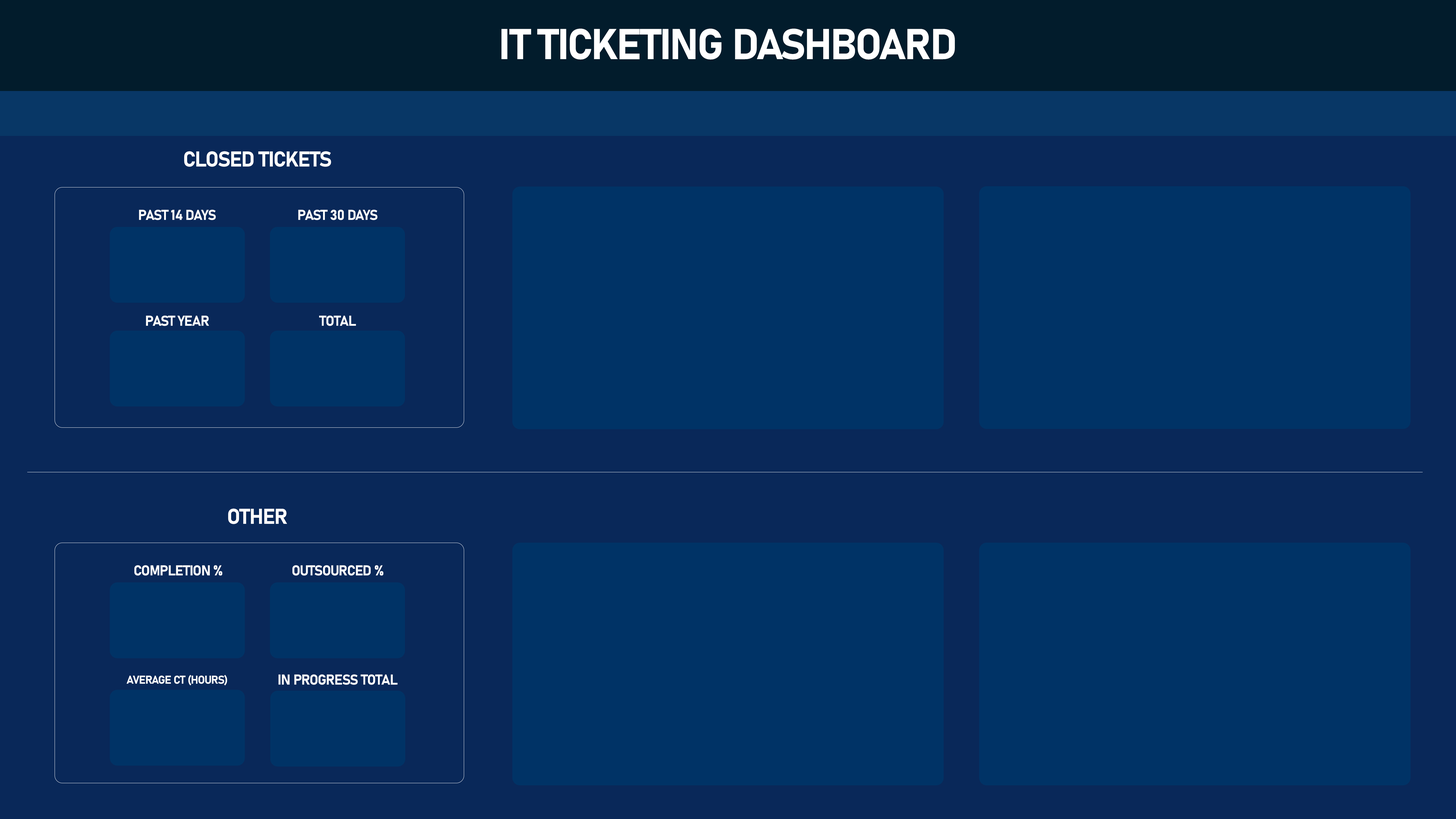
<style>
.page{position:relative;width:1456px;height:819px;background:#003366}
.page>*{position:absolute;margin:0}
.t1{font:42.5px "Bahnschrift-Bold";letter-spacing:-0.04em;color:#ffffff;text-transform:uppercase}
.t2{font:21.2px "Bahnschrift-Bold";letter-spacing:-0.04em;color:#ffffff;text-transform:uppercase}
.t3{font:14.2px "Bahnschrift-Bold";letter-spacing:-0.04em;color:#ffffff;text-transform:uppercase}
.t4{font:11.3px "Bahnschrift-Bold";letter-spacing:-0.04em;color:#ffffff;text-transform:uppercase}
</style>
<div class="page">
<p class="t1" style="left:501px;top:29px;width:454px;height:31px">IT Ticketing Dashboard</p>
<p class="t2" style="left:184px;top:151px;width:147px;height:16px">Closed Tickets</p>
<p class="t3" style="left:139px;top:210px;width:77px;height:10px">Past 14 days</p>
<p class="t3" style="left:298px;top:210px;width:80px;height:10px">Past 30 Days</p>
<p class="t3" style="left:146px;top:315px;width:63px;height:11px">Past year</p>
<p class="t3" style="left:319px;top:315px;width:37px;height:11px">total</p>
<p class="t2" style="left:228px;top:508px;width:59px;height:16px">oTHER</p>
<p class="t3" style="left:134px;top:565px;width:88px;height:11px">Completion %</p>
<p class="t3" style="left:292px;top:565px;width:91px;height:11px">Outsourced %</p>
<p class="t4" style="left:126px;top:675px;width:101px;height:11px">aVERAGE CT (Hours)</p>
<p class="t3" style="left:278px;top:674px;width:120px;height:11px">In progress Total</p>
</div>
